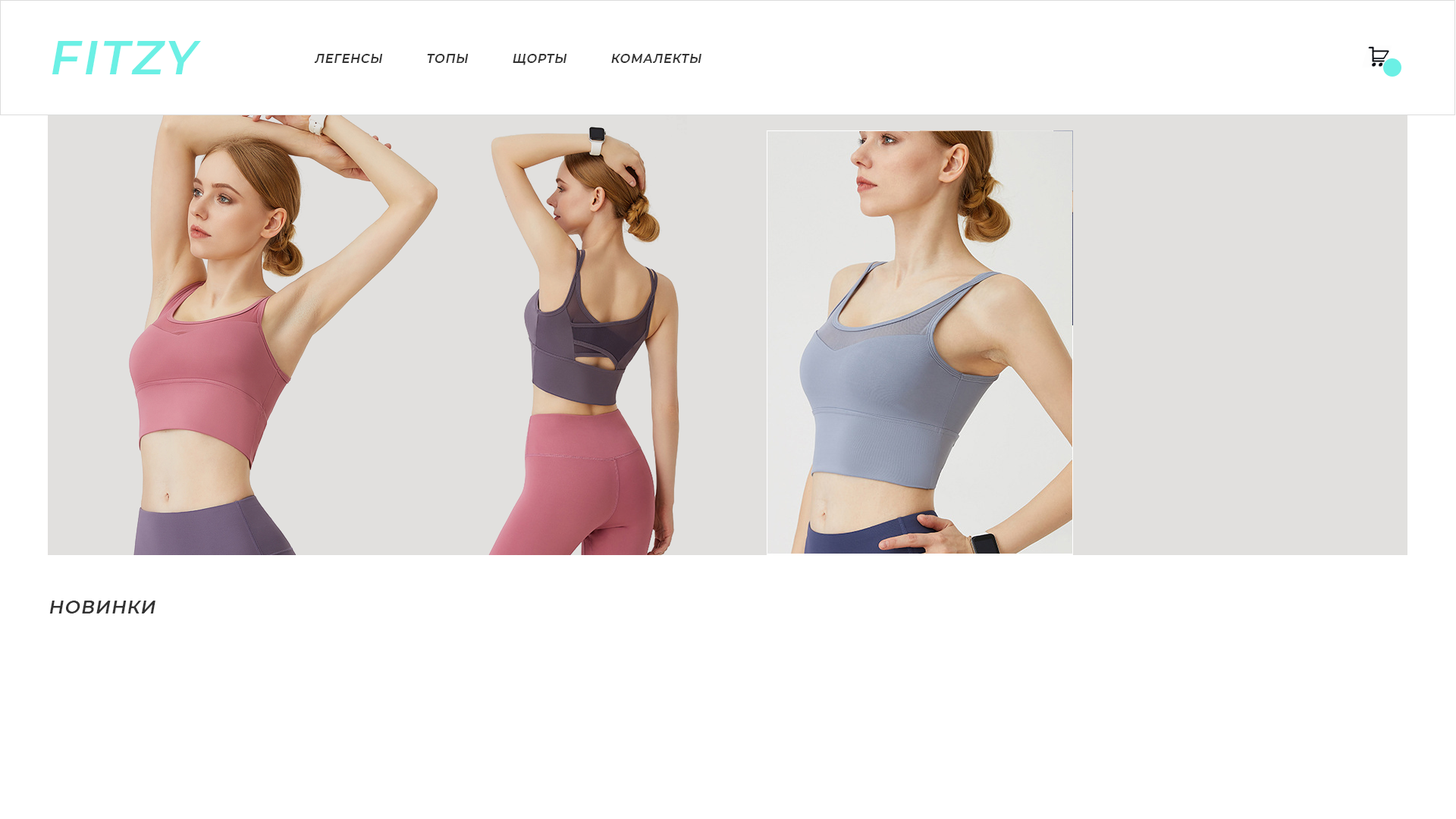
<style>
.page{position:relative;width:1456px;height:819px;background:#ffffff}
.page>*{position:absolute;margin:0}
.t1{font:47.6px "Montserrat-SemiBold";letter-spacing:0.05em;color:#6bf0e5;text-transform:uppercase;font-style:italic}
.t2{font:12.1px "Montserrat-SemiBold";letter-spacing:0.05em;color:#333333;text-transform:uppercase;font-style:italic}
.t3{font:18.2px "Montserrat-SemiBold";letter-spacing:0.05em;color:#333333;text-transform:uppercase;font-style:italic}
</style>
<div class="page">
<p class="t1" style="left:52px;top:41px;width:149px;height:33px">FITZY</p>
<p class="t2" style="left:314px;top:54px;width:387px;height:11px">Легенсы           Топы           Щорты           Комалекты</p>
<p class="t3" style="left:49px;top:601px;width:106px;height:12px">Новинки</p>
</div>
